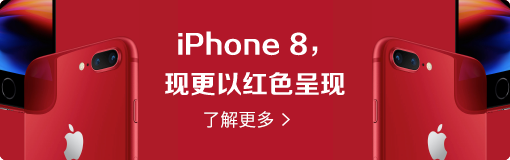
<style>
.page{position:relative;width:510px;height:160px;background:#b21729}
.page>*{position:absolute;margin:0}
.t1{font:26px/40px "FZZCHJW--GB1-0";color:#ffffff}
.t2{font:18px "SourceHanSansCN-Regular";color:#ffffff}
</style>
<div class="page">
<p class="t1" style="left:165px;top:31px;width:180px;height:65px;text-align:center">iPhone 8，<br>现更以红色呈现</p>
<p class="t2" style="left:204px;top:111px;width:70px;height:17px">了解更多</p>
</div>
